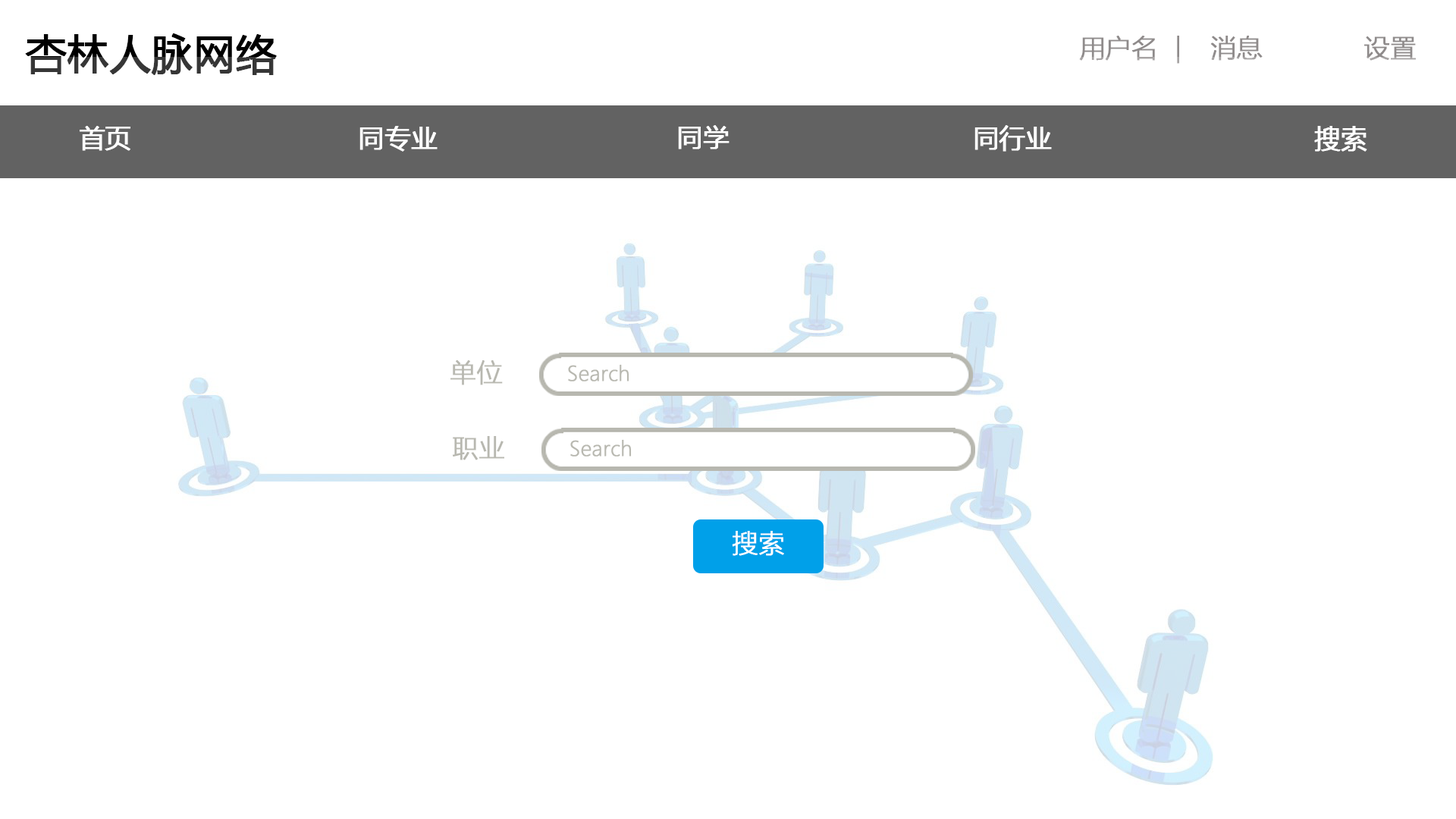
<style>
.page{position:relative;width:1456px;height:819px;background:#ffffff}
.page>*{position:absolute;margin:0}
.t1{font:40.9px "MicrosoftYaHei";font-weight:bold}
.t2{font:25.8px "MicrosoftYaHeiLight";color:#8f8b8b;font-weight:bold}
.t3{font:25.8px "MicrosoftYaHei";color:#ffffff;font-weight:bold}
.t4{font:25.8px "MicrosoftYaHeiLight";color:#b8b8b0;font-weight:bold}
.t5{font:19.9px "MicrosoftYaHeiLight";color:#b8b8b0;font-weight:bold}
.t6{font:25.8px "MicrosoftYaHeiLight";color:#ffffff;font-weight:bold}
</style>
<div class="page">
<p class="t1" style="left:25px;top:33px;width:252px;height:42px">杏林人脉网络</p>
<p class="t2" style="left:1079px;top:36px;width:100px;height:28px">用户名  |</p>
<p class="t2" style="left:1210px;top:36px;width:53px;height:25px">消息</p>
<p class="t2" style="left:1364px;top:36px;width:52px;height:25px">设置</p>
<p class="t3" style="left:80px;top:126px;width:50px;height:25px">首页</p>
<p class="t3" style="left:359px;top:126px;width:79px;height:26px">同专业</p>
<p class="t3" style="left:678px;top:125px;width:52px;height:24px">同学</p>
<p class="t3" style="left:974px;top:125px;width:78px;height:27px">同行业</p>
<p class="t3" style="left:1314px;top:126px;width:53px;height:26px">搜索</p>
<p class="t4" style="left:450px;top:360px;width:53px;height:25px">单位</p>
<p class="t5" style="left:568px;top:364px;width:61px;height:17px">Search</p>
<p class="t4" style="left:453px;top:436px;width:51px;height:24px">职业</p>
<p class="t5" style="left:570px;top:439px;width:62px;height:18px">Search</p>
<p class="t6" style="left:732px;top:531px;width:52px;height:25px">搜索</p>
</div>
